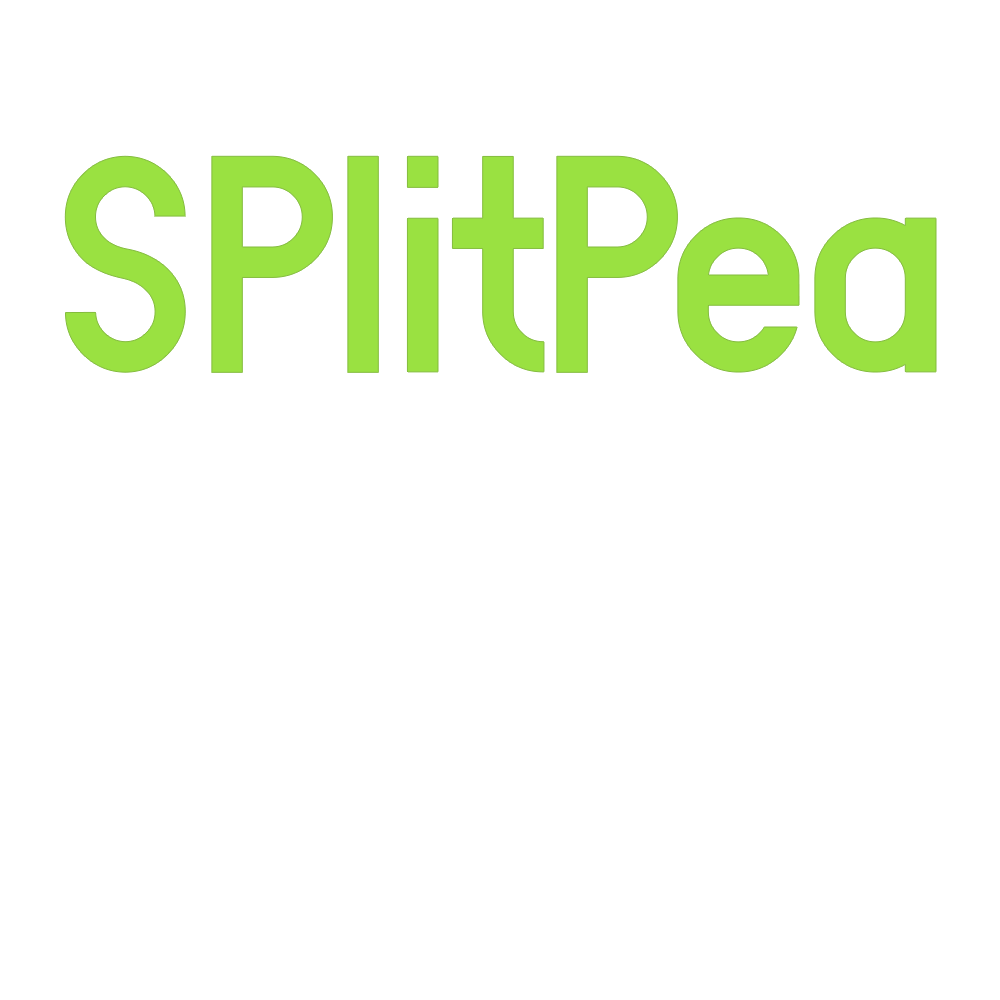
<style>
.page{position:relative;width:1000px;height:1000px;background:#ffffff}
.page>*{position:absolute;margin:0}
.t1{font:308px "LeipzigerMesse";color:#9ae141}
</style>
<div class="page">
<p class="t1" style="left:65px;top:156px;width:871px;height:217px">SPlitPea</p>
</div>
